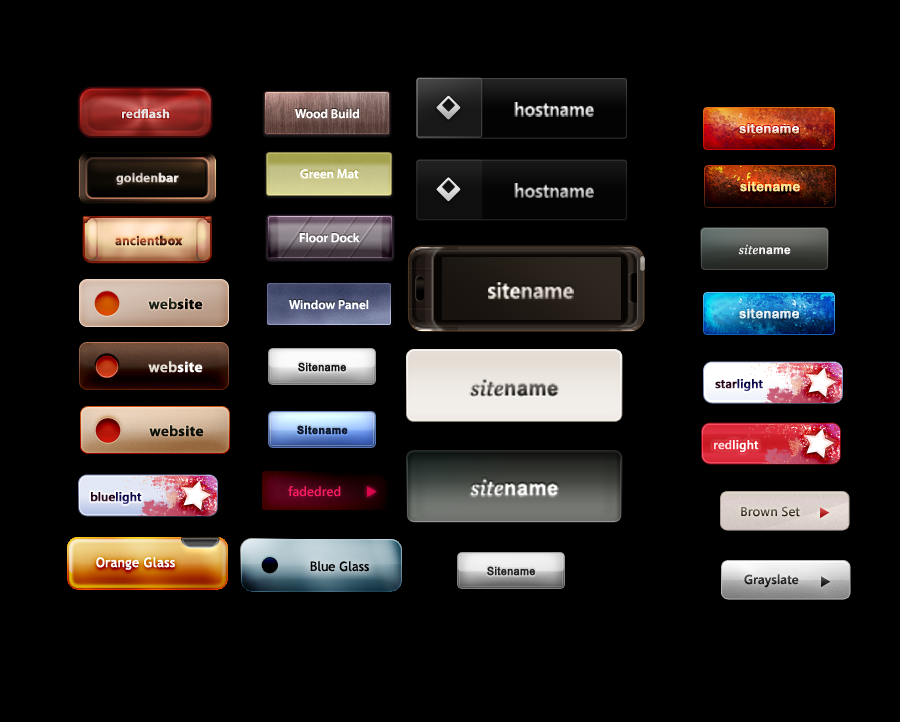
<style>
.page{position:relative;width:900px;height:722px;background:#000000}
.page>*{position:absolute;margin:0}
.t1{font:18.7px "SegoeUI-SemiBold";color:#e1e1e1;scale:0.95 1}
.t2{font:13px "MyriadPro-Bold";color:#e7e3e2;font-weight:bold}
.t3{font:13px "MyriadPro-Semibold";color:#e7e3e2;font-weight:bold}
.t4{font:13px "MyriadPro-Semibold";color:#ffffff}
.t5{font:13px "ArialRoundedMTBold";font-weight:bold}
.t6{font:13px "MyriadPro-Semibold";color:#cec6c3;font-weight:bold}
.t7{font:18.7px "SegoeUI-SemiBold";scale:0.95 1}
.t8{font:13px "ArialRoundedMTBold";color:#ffe794;font-weight:bold}
.t9{font:13px "MyriadPro-Semibold";font-weight:bold}
.t10{font:13px "MyriadPro-Bold";font-weight:bold}
.t11{font:12.6px "Georgia-Italic";letter-spacing:0.025em;color:#ffffff;scale:0.95 1}
.t12{font:12.6px "Arial-BoldMT";letter-spacing:0.025em;color:#ffffff;scale:0.95 1}
.t13{font:22.1px "SegoeUI-SemiBold";color:#ffffff;scale:0.95 1}
.t14{font:22.1px "SegoeUI-SemiBold";color:#dddddd;scale:0.95 1}
.t15{font:15px "MyriadPro-Bold";color:#050705;font-weight:bold}
.t16{font:15px "MyriadPro-Semibold";color:#1b2419;font-weight:bold}
.t17{font:13px "ArialRoundedMTBold";color:#ecf2f6;font-weight:bold}
.t18{font:15px "MyriadPro-Bold";color:#ffffff;font-weight:bold}
.t19{font:15px "MyriadPro-Semibold";color:#e4e0d8;font-weight:bold}
.t20{font:11px "ArialMT";letter-spacing:0.025em;color:#111111;font-weight:bold;scale:0.95 1}
.t21{font:21.3px "Georgia-Italic";letter-spacing:0.025em;scale:0.95 1}
.t22{font:21.3px "Arial-BoldMT";letter-spacing:0.025em;scale:0.95 1}
.t23{font:12px "SegoeUI-SemiBold";color:#0a065f;font-weight:bold}
.t24{font:12px "SegoeUI-SemiBold";color:#2a0019;font-weight:bold}
.t25{font:15px "MyriadPro-Bold";color:#0d120c;font-weight:bold}
.t26{font:15px "MyriadPro-Semibold";color:#0d120c;font-weight:bold}
.t27{font:11px "Arial-BoldMT";letter-spacing:0.025em;color:#0f182a;font-weight:bold;scale:0.95 1}
.t28{font:12px "SegoeUI-SemiBold";color:#fefefe;font-weight:bold}
.t29{font:12px "SegoeUI-SemiBold";color:#ffd4d8;font-weight:bold}
.t30{font:13px "SegoeUI-SemiBold";color:#fe1c65}
.t31{font:21.3px "Georgia-Italic";letter-spacing:0.025em;color:#ffffff;scale:0.95 1}
.t32{font:21.3px "Arial-BoldMT";letter-spacing:0.025em;color:#ffffff;scale:0.95 1}
.t33{font:13px "SegoeUI-SemiBold"}
.t34{font:13px "TrebuchetMS";color:#ffffff;font-weight:bold}
.t35{font:13px "TrebuchetMS";color:#000000}
.t36{font:11px "ArialMT";letter-spacing:0.025em;color:#222222;font-weight:bold;scale:0.95 1}
</style>
<div class="page">
<p class="t1" style="left:514px;top:102px;width:80px;height:15px">hostname</p>
<p class="t2" style="left:122px;top:108px;width:48px;height:11px"><span class="t3">red</span>flash</p>
<p class="t4" style="left:295px;top:108px;width:65px;height:11px">Wood Build</p>
<p class="t5" style="left:739px;top:124px;width:61px;height:10px">sitename</p>
<p class="t6" style="left:116px;top:172px;width:63px;height:13px">golden<span class="t2">bar</span></p>
<p class="t4" style="left:300px;top:169px;width:59px;height:10px">Green Mat</p>
<p class="t7" style="left:514px;top:183px;width:80px;height:15px">hostname</p>
<p class="t8" style="left:740px;top:181px;width:60px;height:11px">sitename</p>
<p class="t4" style="left:299px;top:232px;width:61px;height:11px">Floor Dock</p>
<p class="t9" style="left:115px;top:235px;width:68px;height:11px">ancient<span class="t10">box</span></p>
<p class="t11" style="left:738px;top:244px;width:53px;height:11px">site<span class="t12">name</span></p>
<p class="t13" style="left:488px;top:282px;width:86px;height:17px">site<span class="t14">name</span></p>
<p class="t15" style="left:148px;top:298px;width:55px;height:12px"><span class="t16">web</span>site</p>
<p class="t4" style="left:289px;top:299px;width:80px;height:11px">Window Panel</p>
<p class="t17" style="left:739px;top:309px;width:61px;height:10px">sitename</p>
<p class="t18" style="left:148px;top:361px;width:55px;height:12px"><span class="t19">web</span>site</p>
<p class="t20" style="left:298px;top:362px;width:48px;height:10px">Sitename</p>
<p class="t21" style="left:469px;top:379px;width:90px;height:18px">site<span class="t22">name</span></p>
<p class="t23" style="left:715px;top:379px;width:48px;height:12px"><span class="t24">star</span>light</p>
<p class="t25" style="left:149px;top:425px;width:55px;height:12px"><span class="t26">web</span>site</p>
<p class="t27" style="left:297px;top:425px;width:51px;height:10px">Sitename</p>
<p class="t28" style="left:714px;top:440px;width:45px;height:12px"><span class="t29">red</span>light</p>
<p class="t30" style="left:288px;top:486px;width:53px;height:11px">fadedred</p>
<p class="t31" style="left:469px;top:478px;width:90px;height:19px">site<span class="t32">name</span></p>
<p class="t23" style="left:91px;top:492px;width:51px;height:12px"><span class="t24">blue</span>light</p>
<p class="t33" style="left:741px;top:506px;width:59px;height:11px">Brown Set</p>
<p class="t34" style="left:96px;top:557px;width:79px;height:13px">Orange Glass</p>
<p class="t35" style="left:310px;top:561px;width:59px;height:11px">Blue Glass</p>
<p class="t36" style="left:487px;top:566px;width:48px;height:10px">Sitename</p>
<p class="t33" style="left:744px;top:574px;width:55px;height:14px">Grayslate</p>
</div>
